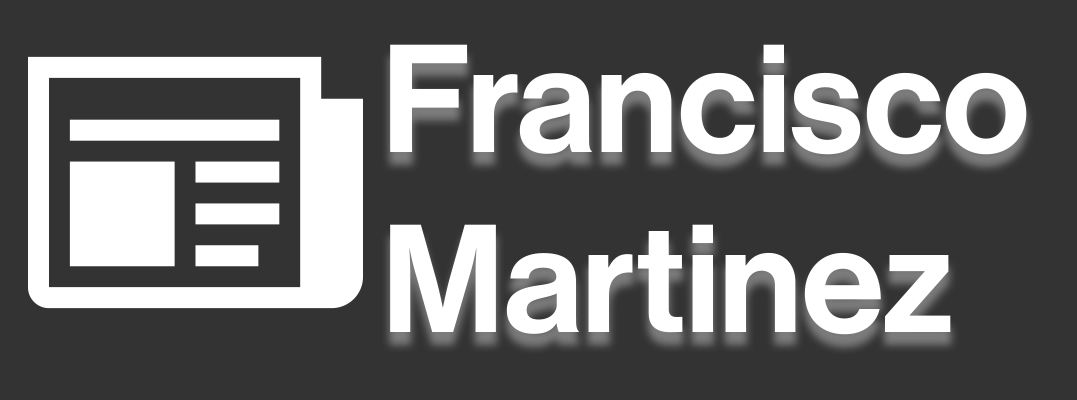
<style>
.page{position:relative;width:1077px;height:400px;background:#333333}
.page>*{position:absolute;margin:0}
.t1{font:150px "NHaasGroteskDSPro-65Md";color:#ffffff}
</style>
<div class="page">
<p class="t1" style="left:390px;top:44px;width:637px;height:291px">Francisco<br>Martinez</p>
</div>
